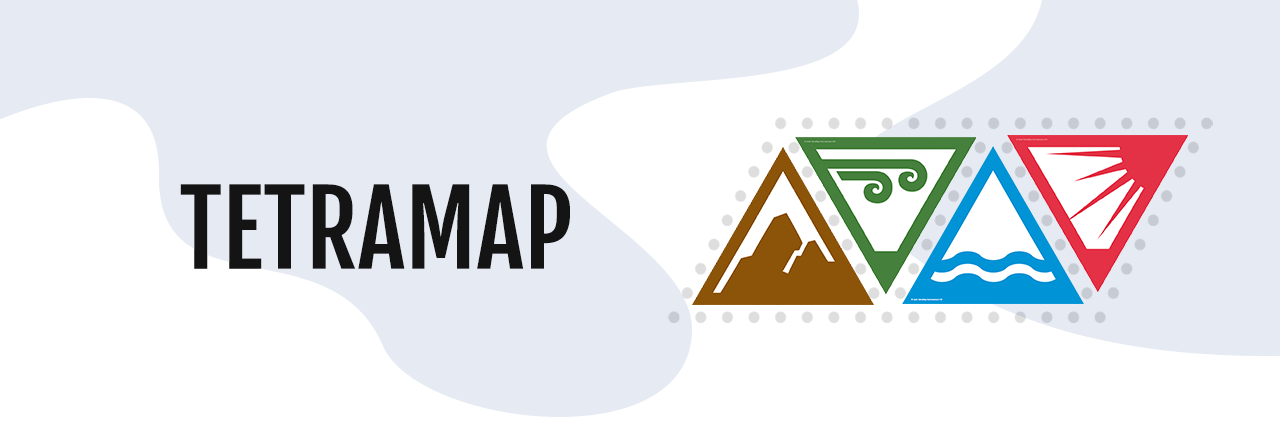
<style>
.page{position:relative;width:1280px;height:445px;background:#e5eaf3}
.page>*{position:absolute;margin:0}
.t1{font:101px "FjallaOne-Regular";color:#141415}
</style>
<div class="page">
<p class="t1" style="left:180px;top:184px;width:390px;height:85px">TETRAMAP</p>
</div>
